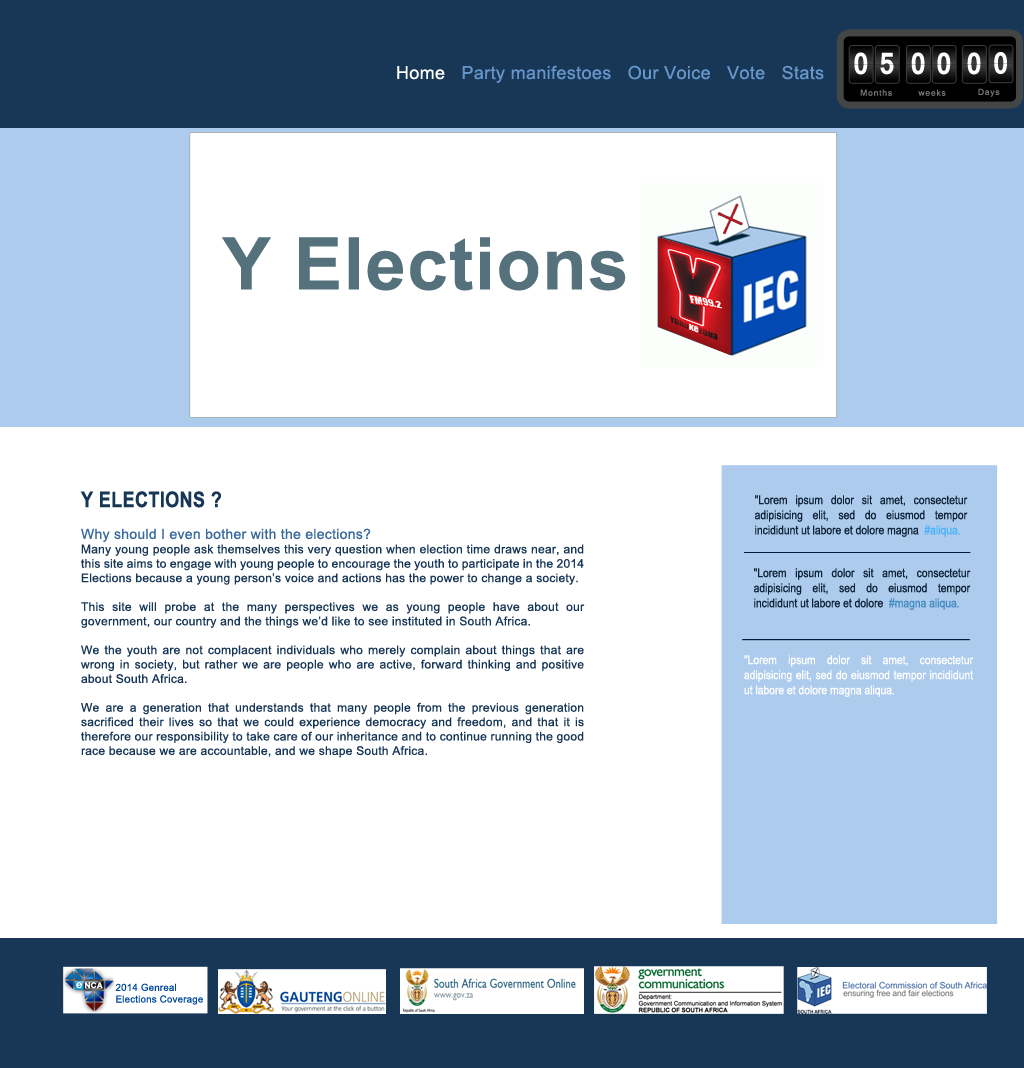
<style>
.page{position:relative;width:1024px;height:1068px;background:#ffffff}
.page>*{position:absolute;margin:0}
.t1{font:29px "Kartika-Bold";letter-spacing:0.105em;color:#ffffff;scale:0.88 1}
.t2{font:18px "ArialMT";letter-spacing:0.02em;color:#6796cb}
.t3{font:18px "ArialMT";letter-spacing:0.02em;color:#ffffff}
.t4{font:8.1px "Kartika";letter-spacing:0.105em;color:#777676}
.t5{font:72.7px "Arial-BoldMT";letter-spacing:0.02em;color:#54717c}
.t6{font:12px "ArialMT";letter-spacing:0.02em;color:#183757}
.t7{font:21.4px/15.1px "Arial-BoldMT";letter-spacing:0.02em;color:#183757;scale:0.84 1}
.t8{font:14px "ArialMT";letter-spacing:0.02em;color:#396a9d}
.t9{font:12.2px/15.1px "ArialMT";color:#0e2338;scale:0.84 1}
.t10{font:12.2px/15.1px "ArialMT";color:#46b1fc;scale:0.84 1}
.t11{font:12.2px/15.1px "ArialMT";color:#4089c1;scale:0.84 1}
.t12{font:12.2px/15.1px "ArialMT";color:#ffffff;scale:0.84 1}
.t13{font:9.7px "ArialMT";letter-spacing:0.02em;color:#00489d}
</style>
<div class="page">
<p class="t1" style="left:854px;top:52px;width:14px;height:23px">0</p>
<p class="t1" style="left:880px;top:52px;width:14px;height:23px">5</p>
<p class="t1" style="left:911px;top:52px;width:14px;height:23px">0</p>
<p class="t1" style="left:937px;top:52px;width:14px;height:23px">0</p>
<p class="t1" style="left:967px;top:52px;width:14px;height:23px">0</p>
<p class="t1" style="left:994px;top:52px;width:13px;height:22px">0</p>
<p class="t2" style="left:397px;top:65px;width:427px;height:18px"><span class="t3">Home   </span>Party manifestoes   Our Voice   Vote   Stats</p>
<p class="t4" style="left:860px;top:89px;width:32px;height:7px">Months</p>
<p class="t4" style="left:918px;top:89px;width:28px;height:7px">weeks</p>
<p class="t4" style="left:978px;top:88px;width:22px;height:9px">Days</p>
<p class="t5" style="left:222px;top:237px;width:404px;height:54px">Y Elections</p>
<p class="t6" style="left:80px;top:491px;width:505px;height:267px;text-align:justify"><span class="t7">Y ELECTIONS ?<br><br></span><span class="t8">Why should I even bother with the elections?<br></span>Many young people ask themselves this very question when election time draws near, and this site aims to engage with young people to encourage the youth to participate in the 2014 Elections because a young person’s voice and actions has the power to change a society.<br><br>This site will probe at the many perspectives we as young people have about our government, our country and the things we’d like to see instituted in South Africa.<br><br>We the youth are not complacent individuals who merely complain about things that are wrong in society, but rather we are people who are active, forward thinking and positive about South Africa.<br><br>We are a generation that understands that many people from the previous generation sacrificed their lives so that we could experience democracy and freedom, and that it is therefore our responsibility to take care of our inheritance and to continue running the good race because we are accountable, and we shape South Africa.</p>
<p class="t9" style="left:755px;top:495px;width:213px;height:42px;text-align:justify">"Lorem ipsum dolor sit amet, consectetur adipisicing elit, sed do eiusmod tempor incididunt ut labore et dolore magna  <span class="t10">#aliqua.</span></p>
<p class="t9" style="left:754px;top:568px;width:217px;height:42px;text-align:justify">"Lorem ipsum dolor sit amet, consectetur adipisicing elit, sed do eiusmod tempor incididunt ut labore et dolore  <span class="t11">#magna aliqua.</span></p>
<p class="t12" style="left:744px;top:655px;width:230px;height:42px;text-align:justify">"Lorem ipsum dolor sit amet, consectetur adipisicing elit, sed do eiusmod tempor incididunt ut labore et dolore magna aliqua.</p>
<p class="t13" style="left:115px;top:983px;width:88px;height:22px">2014 Genreal Elections Coverage</p>
</div>
